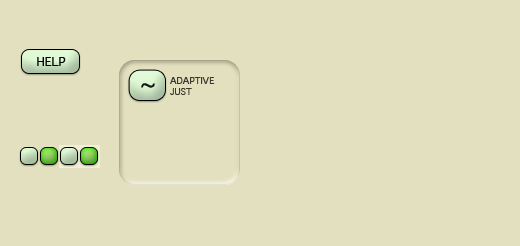
<style>
.page{position:relative;width:520px;height:246px;background:#e2e0be}
.page>*{position:absolute;margin:0}
.t1{font:12px "Geneva";color:#000000}
.t2{font:9px "Geneva";color:#393830}
.t3{font:24px "Geneva";color:#000000}
</style>
<div class="page">
<p class="t1" style="left:37px;top:57px;width:29px;height:9px">HELP</p>
<p class="t2" style="left:170px;top:77px;width:45px;height:18px">ADAPTIVE<br>JUST</p>
<p class="t3" style="left:141px;top:83px;width:14px;height:5px;opacity:0.9">~</p>
</div>
